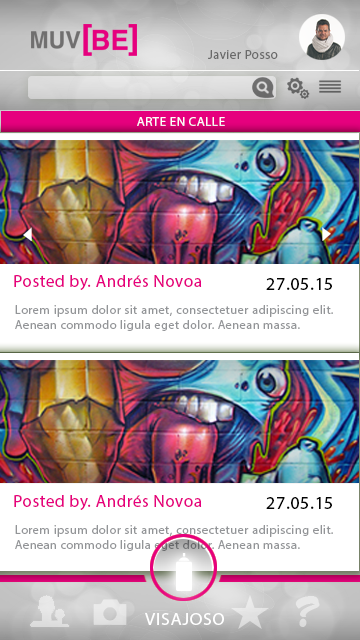
<style>
.page{position:relative;width:360px;height:640px;background:#ffffff}
.page>*{position:absolute;margin:0}
.t1{font:13px "MyriadPro-Regular";letter-spacing:0.035em;color:#6a6a6a}
.t2{font:13px "MyriadPro-Regular";letter-spacing:0.035em;color:#fdfdfe}
.t3{font:16.8px "MyriadPro-Regular";letter-spacing:0.035em;color:#e6007e}
.t4{font:18.1px "MyriadPro-Regular";letter-spacing:0.035em;color:#040404}
.t5{font:12.4px "MyriadPro-Regular";letter-spacing:0.035em;color:#939598}
.t6{font:35.4px "CandyScript";letter-spacing:0.035em;color:#ffffff}
.t7{font:17.5px "MyriadPro-Regular";letter-spacing:0.035em;color:#ffffff;scale:1.03 1}
</style>
<div class="page">
<p class="t1" style="left:208px;top:50px;width:70px;height:9px">Javier Posso</p>
<p class="t2" style="left:137px;top:117px;width:88px;height:9px">ARTE EN CALLE</p>
<p class="t3" style="left:14px;top:275px;width:188px;height:15px">Posted by. Andrés Novoa</p>
<p class="t4" style="left:266px;top:278px;width:66px;height:12px">27.05.15</p>
<p class="t5" style="left:15px;top:305px;width:318px;height:26px;text-align:justify">Lorem ipsum dolor sit amet, consectetuer adipiscing elit. Aenean commodo ligula eget dolor. Aenean massa.</p>
<p class="t3" style="left:14px;top:495px;width:188px;height:15px">Posted by. Andrés Novoa</p>
<p class="t4" style="left:266px;top:497px;width:66px;height:12px">27.05.15</p>
<p class="t5" style="left:15px;top:525px;width:318px;height:26px;text-align:justify">Lorem ipsum dolor sit amet, consectetuer adipiscing elit. Aenean commodo ligula eget dolor. Aenean massa.</p>
<p class="t6" style="left:295px;top:596px;width:25px;height:31px;opacity:0.5">?</p>
<p class="t7" style="left:145px;top:613px;width:79px;height:12px">VISAJOSO</p>
</div>
